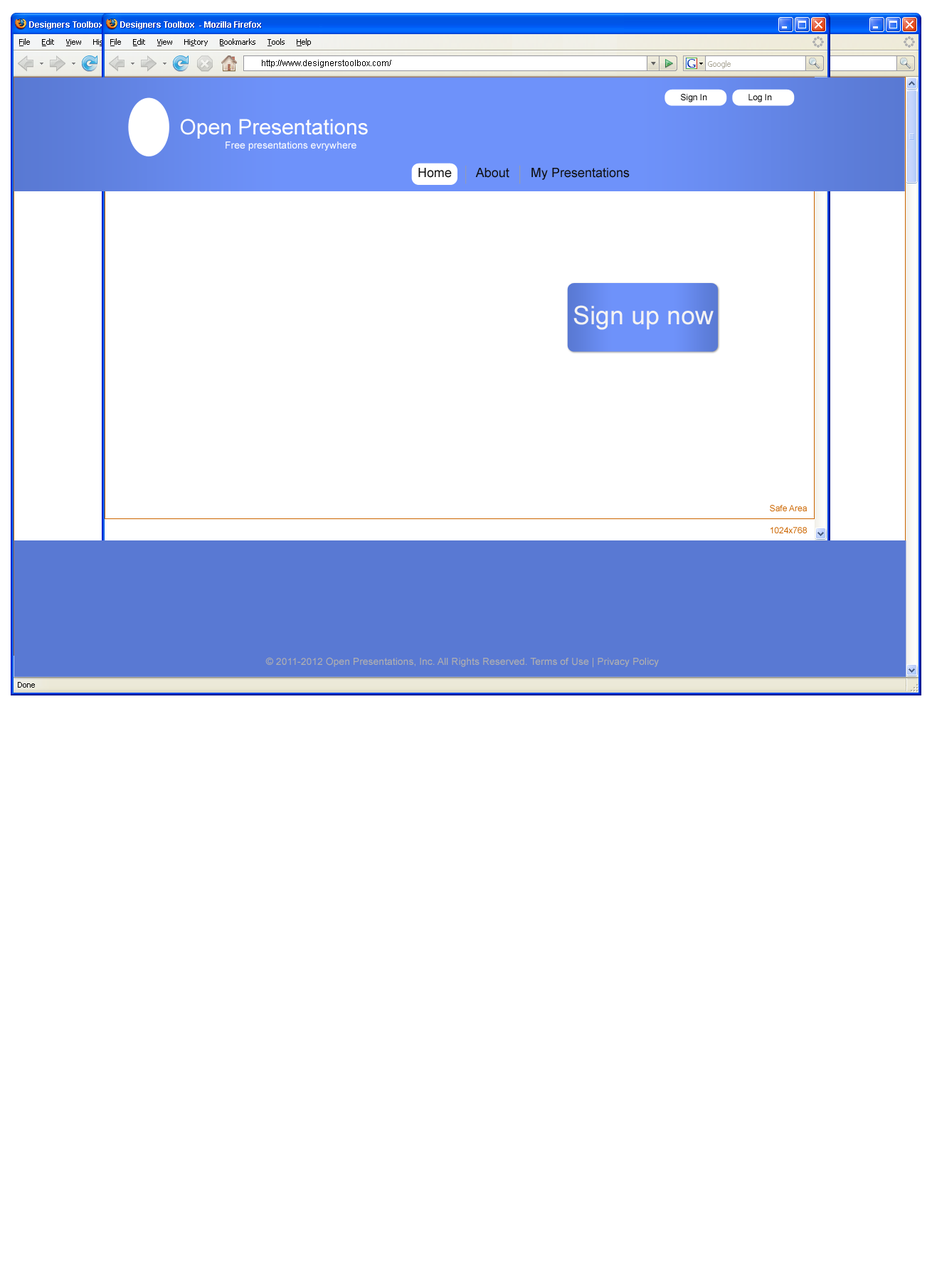
<style>
.page{position:relative;width:932px;height:1280px;background:#ffffff}
.page>*{position:absolute;margin:0}
.t1{font:8.5px "Arial-BoldMT";color:#ffffff}
.t2{font:8.5px "ArialMT";color:#000000}
.t3{font:8.5px "ArialMT";color:#010101}
.t4{font:21.3px "ArialMT";color:#fdfdfd}
.t5{font:10px "ArialMT";color:#fdfdfd}
.t6{font:12.8px "ArialMT";color:#0e0e0e}
.t7{font:25.6px "ArialMT";color:#f5f3f3}
.t8{font:8.5px "ArialMT";color:#cc6600}
.t9{font:10px "ArialMT";color:#b1b0b0}
</style>
<div class="page">
<p class="t1" style="left:29px;top:21px;width:141px;height:8px">Designers Toolbox  - Mozilla Firefox</p>
<p class="t1" style="left:120px;top:21px;width:141px;height:8px">Designers Toolbox  - Mozilla Firefox</p>
<p class="t2" style="left:262px;top:60px;width:129px;height:8px">http://www.designerstoolbox.com/</p>
<p class="t3" style="left:681px;top:94px;width:26px;height:8px">Sign In</p>
<p class="t3" style="left:748px;top:94px;width:24px;height:8px">Log In</p>
<p class="t4" style="left:181px;top:119px;width:187px;height:20px">Open Presentations</p>
<p class="t5" style="left:225px;top:142px;width:131px;height:9px">Free presentations evrywhere</p>
<p class="t6" style="left:418px;top:168px;width:34px;height:10px">Home</p>
<p class="t6" style="left:475px;top:168px;width:34px;height:10px">About</p>
<p class="t6" style="left:531px;top:168px;width:98px;height:12px">My Presentations</p>
<p class="t7" style="left:573px;top:305px;width:140px;height:25px">Sign up now</p>
<p class="t8" style="left:769px;top:505px;width:37px;height:7px">Safe Area</p>
<p class="t8" style="left:770px;top:527px;width:36px;height:6px">1024x768</p>
<p class="t9" style="left:265px;top:657px;width:394px;height:11px">© 2011-2012 Open Presentations, Inc. All Rights Reserved. Terms of Use | Privacy Policy</p>
</div>
